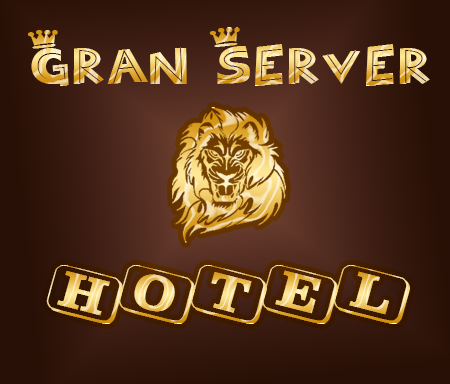
<style>
.page{position:relative;width:450px;height:384px}
.page>*{position:absolute;margin:0}
.t1{font:50px "BayouCowboy"}
.t2{font:43.9px "JoyCards";scale:1.04 1}
</style>
<div class="page">
<p class="t1" style="left:27px;top:27px;width:403px;height:59px">Gran Server</p>
<p class="t2" style="left:46px;top:265px;width:364px;height:59px">Hotel</p>
</div>
